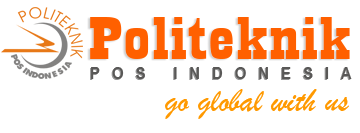
<style>
.page{position:relative;width:360px;height:133px;background:#ffffff}
.page>*{position:absolute;margin:0}
.t1{font:62.8px "Playbill";letter-spacing:0.01em;color:#ff6000;scale:1.78 1}
.t2{font:16.2px "Arial-BoldMT";letter-spacing:0.75em;color:#595857;scale:0.95 1}
.t3{font:33.8px "BrushScriptMT";color:#ff9900}
</style>
<div class="page">
<p class="t1" style="left:90px;top:17px;width:260px;height:42px">Politeknik</p>
<p class="t2" style="left:91px;top:67px;width:261px;height:12px">POS INDONESIA</p>
<p class="t3" style="left:165px;top:89px;width:184px;height:30px">go global with us</p>
</div>
